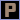
<style>
.page{position:relative;width:20px;height:20px;background:#000000}
.page>*{position:absolute;margin:0}
.t1{font:20px "Sucrose-Bold";letter-spacing:-0.075em;color:#9f8672;scale:1.16 1}
</style>
<div class="page">
<p class="t1" style="left:5px;top:3px;width:11px;height:14px">P</p>
</div>
